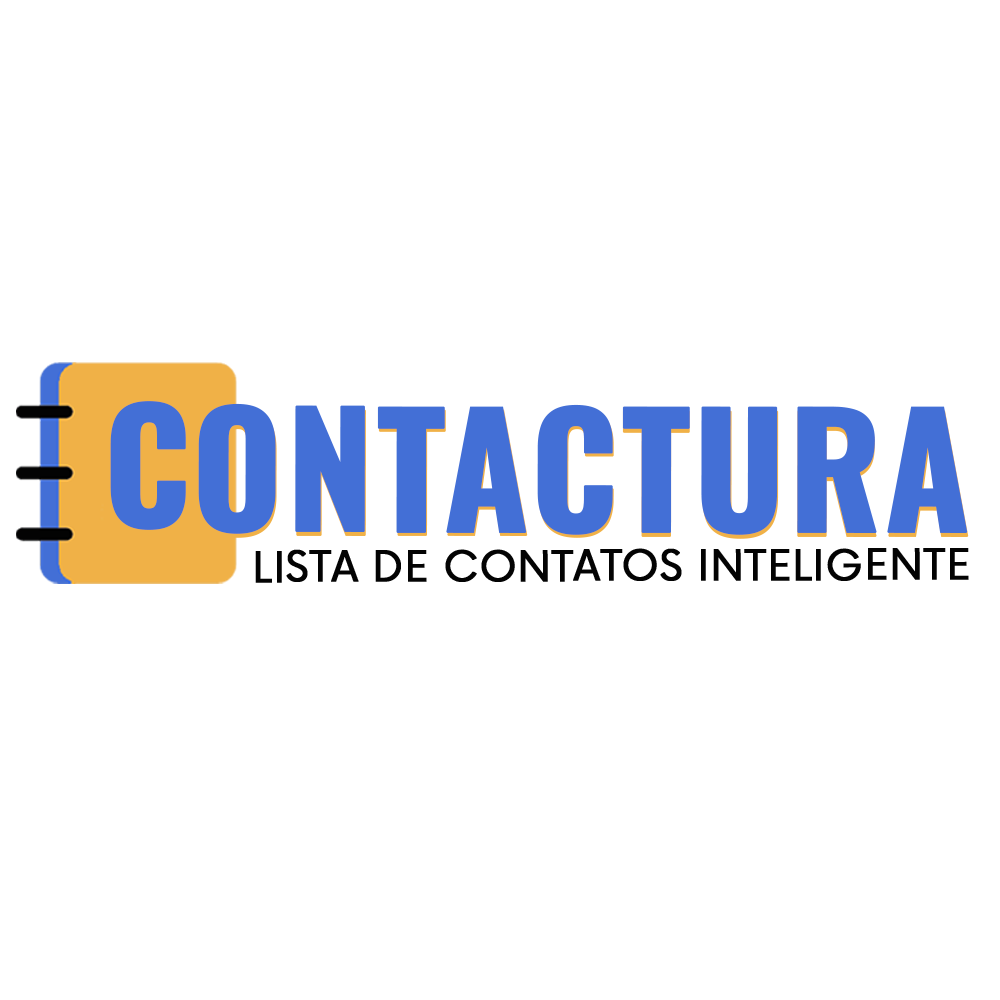
<style>
.page{position:relative;width:1000px;height:1000px;background:#ffffff}
.page>*{position:absolute;margin:0}
.t1{font:154.2px "Oswald-Bold";color:#436fd6;text-transform:uppercase;font-weight:bold}
.t2{font:153.7px "Oswald-Bold";color:#436fd6;text-transform:uppercase;font-weight:bold}
.t3{font:41.2px "Now-Regular";color:#030303;text-transform:uppercase;font-weight:bold}
</style>
<div class="page">
<p class="t1" style="left:110px;top:401px;width:76px;height:129px">c</p>
<p class="t2" style="left:198px;top:403px;width:770px;height:132px">ontactura</p>
<p class="t2" style="left:199px;top:407px;width:770px;height:132px">ontactura</p>
<p class="t3" style="left:255px;top:548px;width:714px;height:35px">lista de contatos inteligente</p>
</div>
